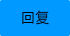
<style>
.page{position:relative;width:70px;height:36px;background:#0099ff}
.page>*{position:absolute;margin:0}
.t1{font:15px "STXihei";letter-spacing:-0.045em;color:#000000}
</style>
<div class="page">
<p class="t1" style="left:22px;top:10px;width:27px;height:15px">回复</p>
</div>
